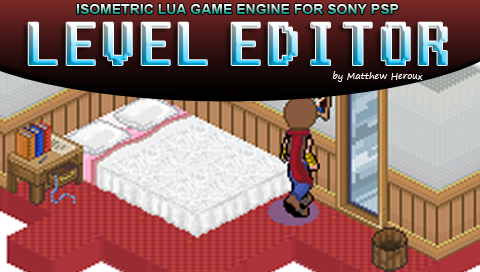
<style>
.page{position:relative;width:480px;height:272px}
.page>*{position:absolute;margin:0}
.t1{font:14px "Arial-BoldMT"}
.t2{font:60px "Fixedsys"}
.t3{font:9px "SegoePrint";color:#fdfeff}
</style>
<div class="page">
<p class="t1" style="left:76px;top:4px;width:323px;height:10px">ISOMETRIC LUA GAME ENGINE FOR SONY PSP</p>
<p class="t2" style="left:28px;top:22px;width:419px;height:43px">LEVEL EDITOR</p>
<p class="t3" style="left:333px;top:71px;width:90px;height:11px">by Matthew Heroux</p>
</div>
